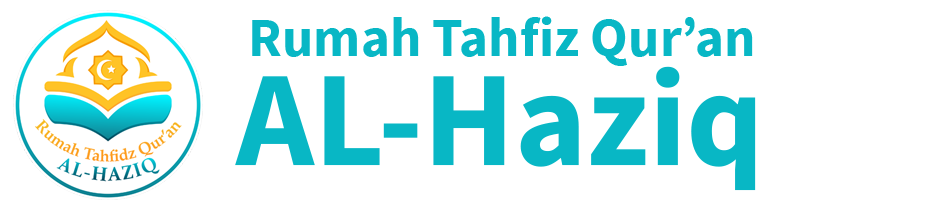
<style>
.page{position:relative;width:944px;height:200px;background:#ffffff}
.page>*{position:absolute;margin:0}
.t1{font:55.2px "SourceSansPro-Bold";color:#08b7c5}
.t2{font:135.6px "SourceSansPro-Bold";color:#08b7c5}
</style>
<div class="page">
<p class="t1" style="left:252px;top:16px;width:501px;height:50px">Rumah Tahfiz Qur’an</p>
<p class="t2" style="left:235px;top:66px;width:521px;height:125px">AL-Haziq</p>
</div>
